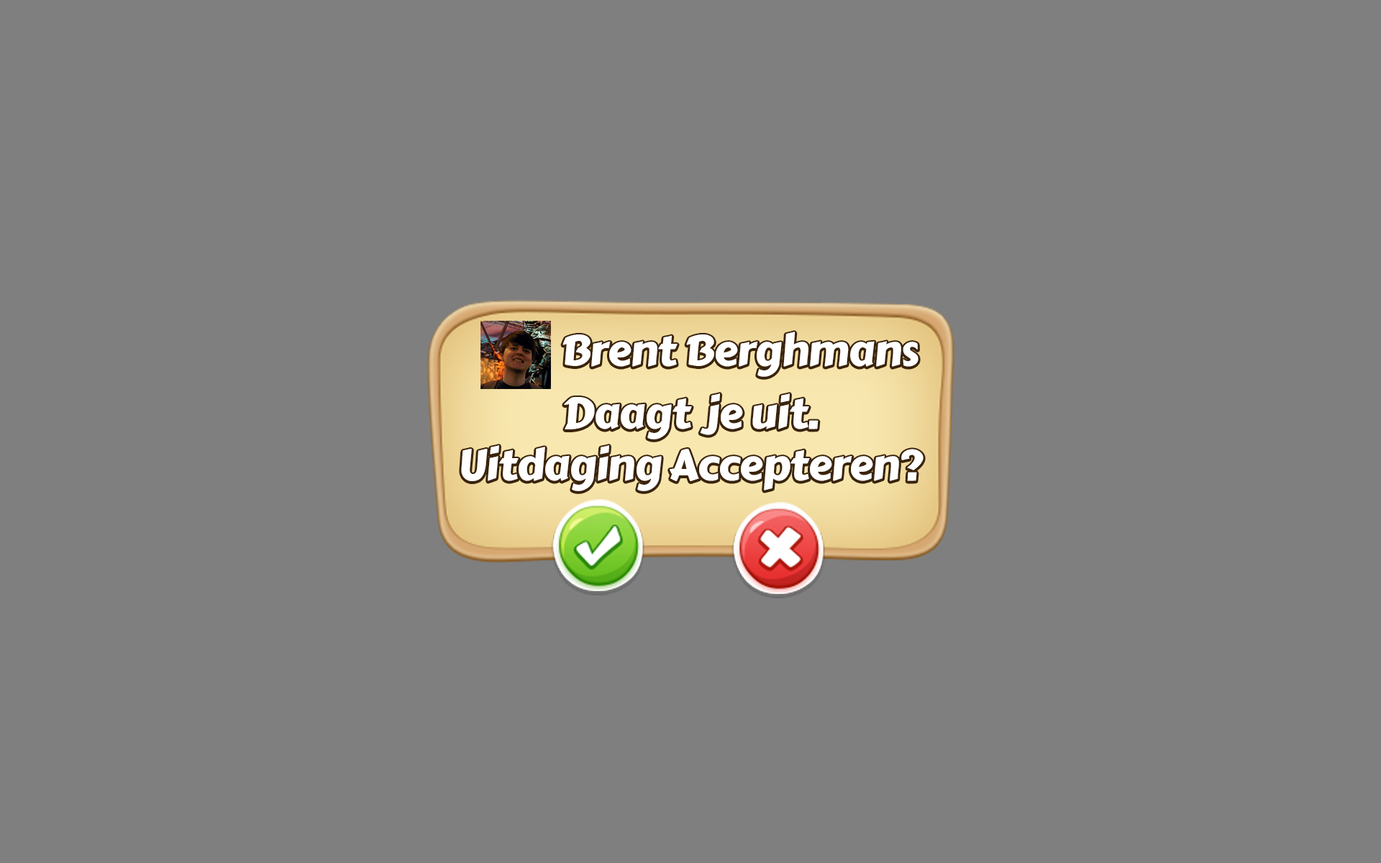
<style>
.page{position:relative;width:1381px;height:863px;background:#7f7f7f}
.page>*{position:absolute;margin:0}
.t1{font:43.2px "CarterOne";letter-spacing:-0.02em;color:#ffffff}
</style>
<div class="page">
<p class="t1" style="left:563px;top:332px;width:356px;height:45px">Brent Berghmans</p>
<p class="t1" style="left:461px;top:394px;width:463px;height:97px;text-align:center">Daagt  je uit.<br>Uitdaging Accepteren?</p>
</div>
